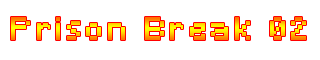
<style>
.page{position:relative;width:320px;height:60px;background:#ffffff}
.page>*{position:absolute;margin:0}
.t1{font:30px "Minecraft";letter-spacing:0.15em}
</style>
<div class="page">
<p class="t1" style="left:11px;top:17px;width:295px;height:23px">Prison Break 02</p>
</div>
